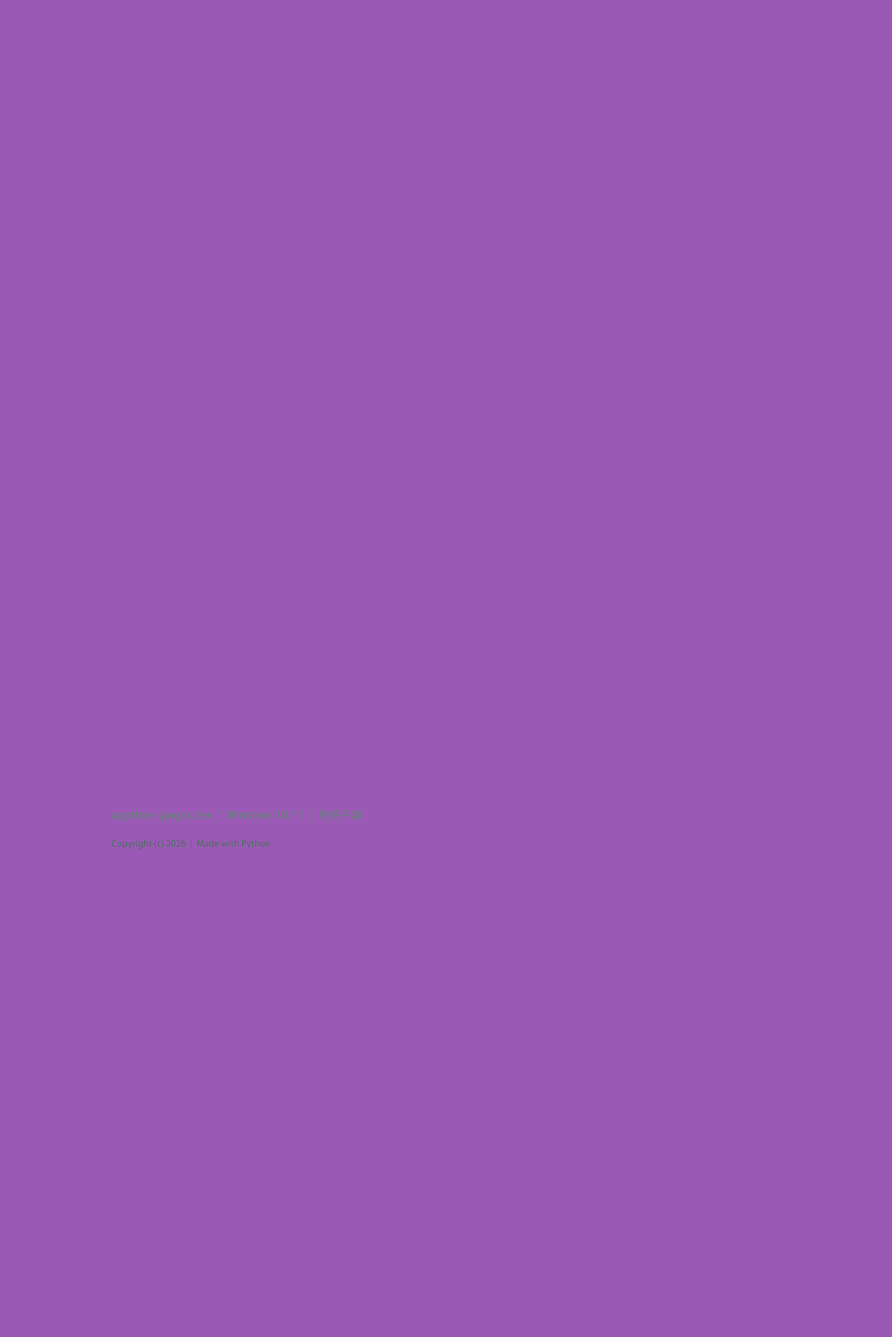
<style>
.page{position:relative;width:892px;height:1337px;background:#9b59b6}
.page>*{position:absolute;margin:0}
.t1{font:11.1px "AdobeHeitiStd-Regular";color:#648278}
.t2{font:8.9px "AdobeHeitiStd-Regular";color:#506e64}
</style>
<div class="page">
<p class="t1" style="left:111px;top:810px;width:251px;height:13px">apptimer.pages.dev  |  Windows 10/11  |  免费开源</p>
<p class="t2" style="left:111px;top:839px;width:159px;height:11px">Copyright (c) 2026  |  Made with Python</p>
</div>
